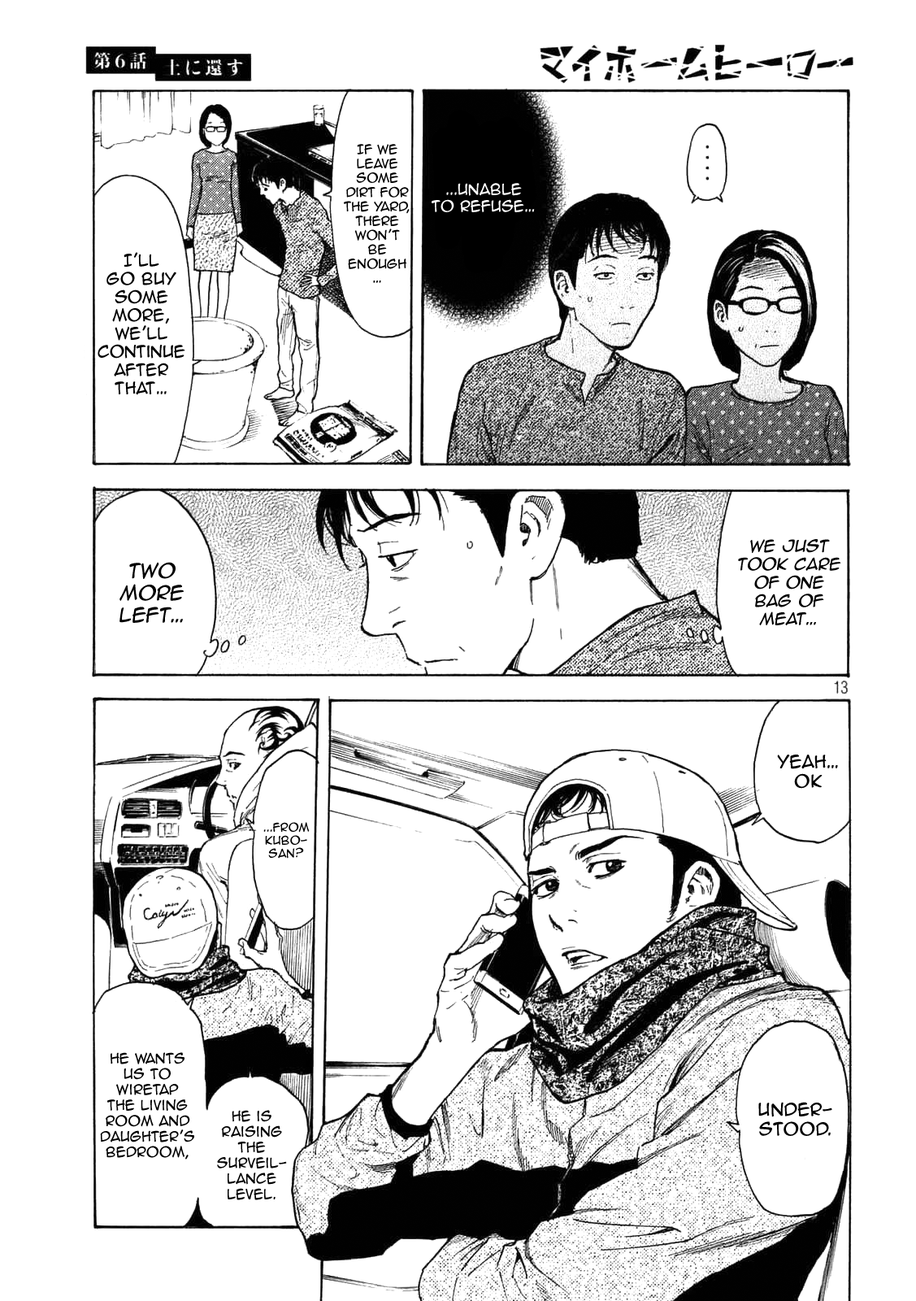
<style>
.page{position:relative;width:916px;height:1301px;background:#ffffff}
.page>*{position:absolute;margin:0}
.t1{font:11.9px "AnimeAce2.0BB";color:#000000}
.t2{font:14.1px "AnimeAce2.0BB";color:#ffffff}
.t3{font:15.2px "AnimeAce2.0BB";color:#000000}
.t4{font:15.2px "AnimeAce2.0BB";color:#000000;font-style:italic}
.t5{font:18.4px "AnimeAce2.0BB";color:#000000;font-style:italic}
.t6{font:16.3px "AnimeAce2.0BB";color:#000000}
.t7{font:10.8px "AnimeAce2.0BB";color:#000000}
.t8{font:13px "AnimeAce2.0BB";color:#000000}
.t9{font:9.8px "AnimeAce2.0BB";color:#000000}
</style>
<div class="page">
<p class="t1" style="left:344px;top:144px;width:66px;height:139px;text-align:center">If we leave some dirt for the yard, there won’t be enough…</p>
<p class="t2" style="left:432px;top:183px;width:103px;height:29px;text-align:center">...Unable <br>to refuse…</p>
<p class="t3" style="left:98px;top:252px;width:87px;height:143px;text-align:center">I’ll <br>go buy some more, we’ll continue after that…</p>
<p class="t4" style="left:738px;top:539px;width:104px;height:86px;text-align:center">We just took care of one <br>bag of meat…</p>
<p class="t5" style="left:120px;top:562px;width:64px;height:61px;text-align:center">Two more left…</p>
<p class="t6" style="left:777px;top:755px;width:61px;height:34px;text-align:center">Yeah… Ok</p>
<p class="t7" style="left:263px;top:822px;width:47px;height:37px;text-align:center">...from Kubo-san?</p>
<p class="t8" style="left:100px;top:1052px;width:94px;height:108px;text-align:center">He wants us to wiretap <br>the living room and daughter’s bedroom,</p>
<p class="t6" style="left:759px;top:1102px;width:74px;height:34px;text-align:center">Under-<br>stood.</p>
<p class="t9" style="left:217px;top:1110px;width:70px;height:90px;text-align:center">He is raising the surveil-lance level.</p>
</div>
